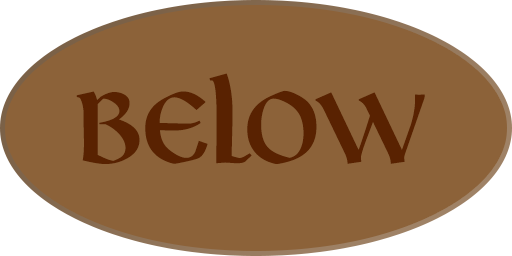
<style>
.page{position:relative;width:512px;height:256px;background:#8c6239}
.page>*{position:absolute;margin:0}
.t1{font:128px "Livingstone";color:#592201}
</style>
<div class="page">
<p class="t1" style="left:76px;top:73px;width:349px;height:91px">below</p>
</div>
